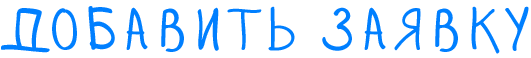
<style>
.page{position:relative;width:531px;height:58px;background:#ffffff}
.page>*{position:absolute;margin:0}
.t1{font:60px "Zhizn";color:#007fff}
</style>
<div class="page">
<p class="t1" style="left:1px;top:6px;width:528px;height:48px">добавить заявку</p>
</div>
